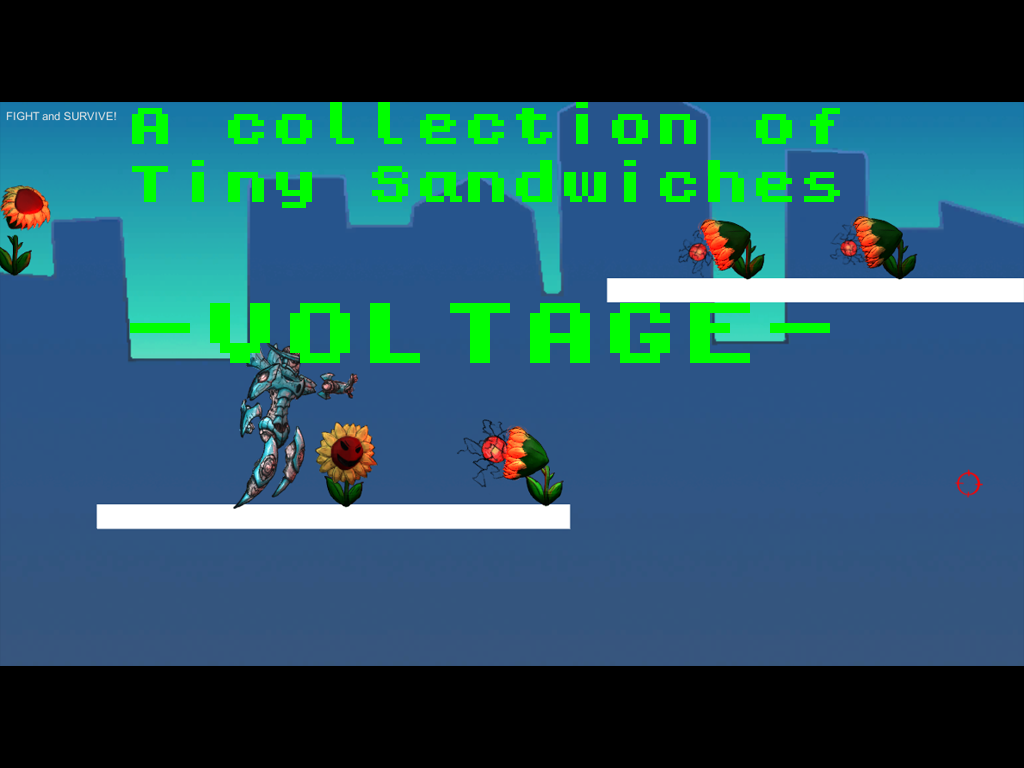
<style>
.page{position:relative;width:1024px;height:768px;background:#000000}
.page>*{position:absolute;margin:0}
.t1{font:48px "KongtextRegular";color:#00ff00}
.t2{font:80px "KongtextRegular";color:#00ff00}
</style>
<div class="page">
<p class="t1" style="left:132px;top:102px;width:708px;height:106px">A collection of<br>Tiny Sandwiches</p>
<p class="t2" style="left:130px;top:303px;width:700px;height:60px">-VOLTAGE-</p>
</div>
